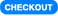
<style>
.page{position:relative;width:58px;height:16px;background:#0080ff}
.page>*{position:absolute;margin:0}
.t1{font:8.3px "HeliosBold";color:#ffffff}
</style>
<div class="page">
<p class="t1" style="left:4px;top:4px;width:49px;height:7px">CHECKOUT</p>
</div>
